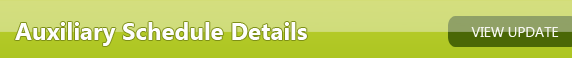
<style>
.page{position:relative;width:572px;height:58px}
.page>*{position:absolute;margin:0}
.t1{font:24px "SegoeUI-Bold";color:#fefefe}
.t2{font:14px "SegoeUI";color:#f6f7f1}
</style>
<div class="page">
<p class="t1" style="left:15px;top:22px;width:292px;height:24px">Auxiliary Schedule Details</p>
<p class="t2" style="left:471px;top:27px;width:88px;height:10px">VIEW UPDATE</p>
</div>
